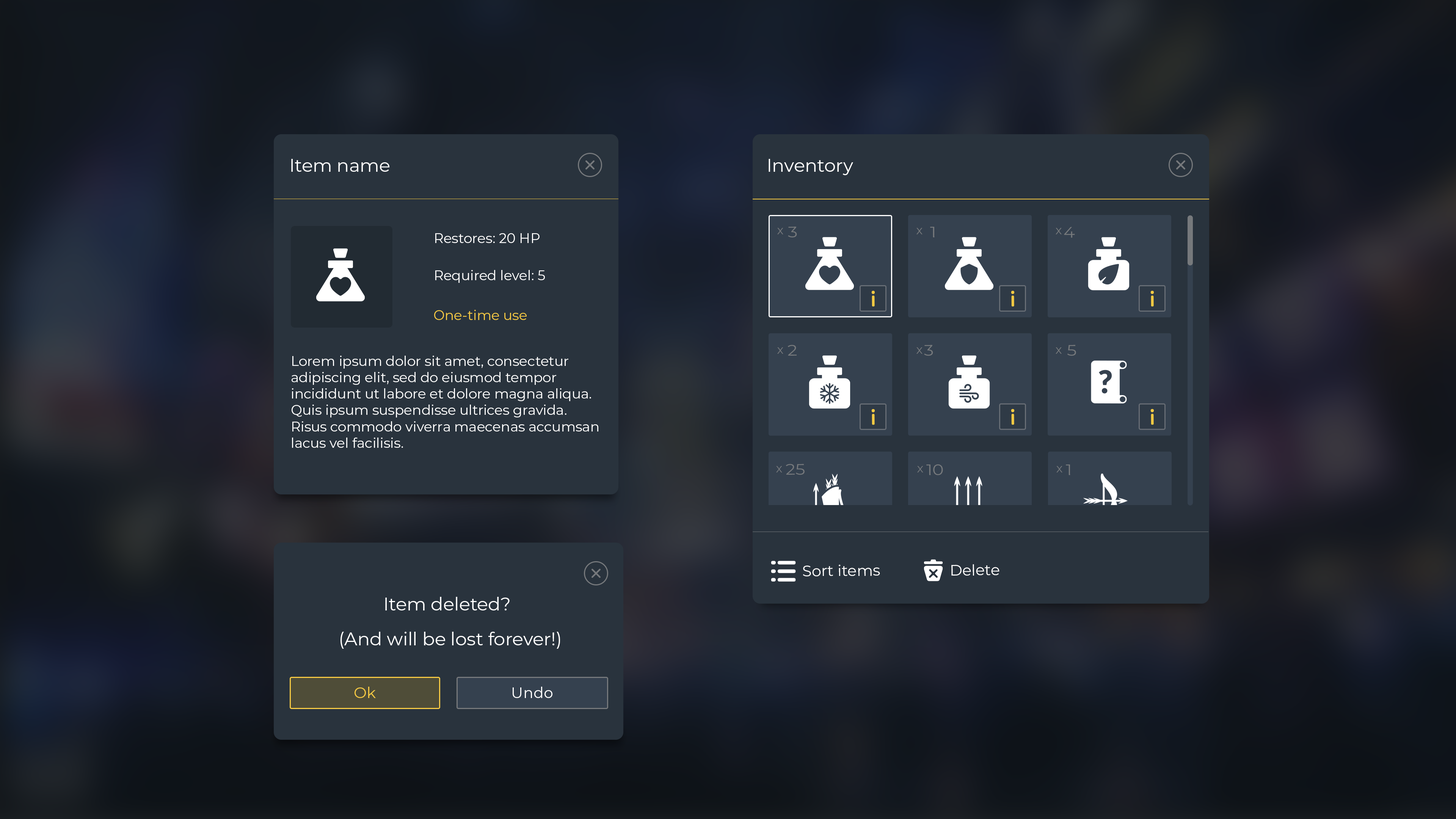
<style>
.page{position:relative;width:1456px;height:819px}
.page>*{position:absolute;margin:0}
.t1{font:18.2px "Montserrat-Regular";color:#ffffff}
.t2{font:13.6px "Montserrat-Regular";color:#ffffff}
.t3{font:12.1px "Montserrat-Regular";color:#76797c}
.t4{font:15.2px "Montserrat-Regular";color:#76797c;scale:1.13 1}
.t5{font:13.6px "Montserrat-Regular";color:#f6ca43}
.t6{font:15.2px "Montserrat-Regular";color:#ffffff}
.t7{font:15.2px "Montserrat-Regular";color:#f6ca43}
</style>
<div class="page">
<p class="t1" style="left:291px;top:159px;width:98px;height:13px">Item name</p>
<p class="t1" style="left:769px;top:159px;width:84px;height:16px">Inventory</p>
<p class="t2" style="left:435px;top:233px;width:105px;height:10px">Restores: 20 HP</p>
<p class="t3" style="left:777px;top:228px;width:6px;height:6px">x</p>
<p class="t4" style="left:788px;top:226px;width:9px;height:12px">3</p>
<p class="t3" style="left:916px;top:228px;width:7px;height:6px">x</p>
<p class="t4" style="left:930px;top:227px;width:5px;height:10px">1</p>
<p class="t3" style="left:1056px;top:228px;width:6px;height:6px">x</p>
<p class="t4" style="left:1064px;top:227px;width:11px;height:11px">4</p>
<p class="t2" style="left:435px;top:270px;width:110px;height:13px">Required level: 5</p>
<p class="t5" style="left:434px;top:310px;width:93px;height:10px">One-time use</p>
<p class="t3" style="left:777px;top:347px;width:6px;height:7px">x</p>
<p class="t4" style="left:788px;top:345px;width:9px;height:11px">2</p>
<p class="t3" style="left:916px;top:347px;width:7px;height:7px">x</p>
<p class="t4" style="left:924px;top:345px;width:9px;height:11px">3</p>
<p class="t3" style="left:1056px;top:347px;width:6px;height:7px">x</p>
<p class="t4" style="left:1067px;top:345px;width:9px;height:11px">5</p>
<p class="t2" style="left:292px;top:356px;width:306px;height:92px">Lorem ipsum dolor sit amet, consectetur adipiscing elit, sed do eiusmod tempor incididunt ut labore et dolore magna aliqua. Quis ipsum suspendisse ultrices gravida. Risus commodo viverra maecenas accumsan lacus vel facilisis.</p>
<p class="t6" style="left:803px;top:565px;width:77px;height:12px">Sort items</p>
<p class="t6" style="left:951px;top:564px;width:48px;height:12px">Delete</p>
<p class="t1" style="left:385px;top:597px;width:125px;height:13px">Item deleted?</p>
<p class="t1" style="left:340px;top:632px;width:220px;height:17px">(And will be lost forever!)</p>
<p class="t7" style="left:355px;top:687px;width:21px;height:11px">Ok</p>
<p class="t6" style="left:513px;top:687px;width:39px;height:11px">Undo</p>
</div>
